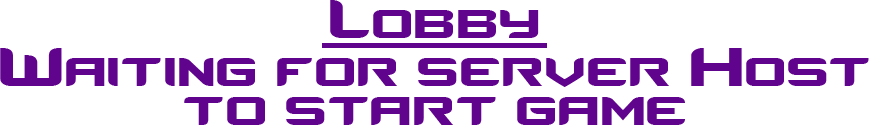
<style>
.page{position:relative;width:869px;height:125px;background:#ffffff}
.page>*{position:absolute;margin:0}
.t1{font:75px "Counter-StrikeRegular";color:#61048d}
</style>
<div class="page">
<p class="t1" style="left:330px;top:0px;width:209px;height:38px">Lobby</p>
<p class="t1" style="left:0px;top:48px;width:869px;height:39px">Waiting for server Host</p>
<p class="t1" style="left:184px;top:97px;width:501px;height:28px">to start game</p>
</div>
